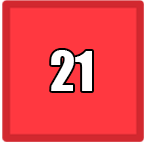
<style>
.page{position:relative;width:144px;height:142px;background:#ff3840}
.page>*{position:absolute;margin:0}
.t1{font:50px "Impact";color:#ffffff}
</style>
<div class="page">
<p class="t1" style="left:51px;top:50px;width:41px;height:41px">21</p>
</div>
